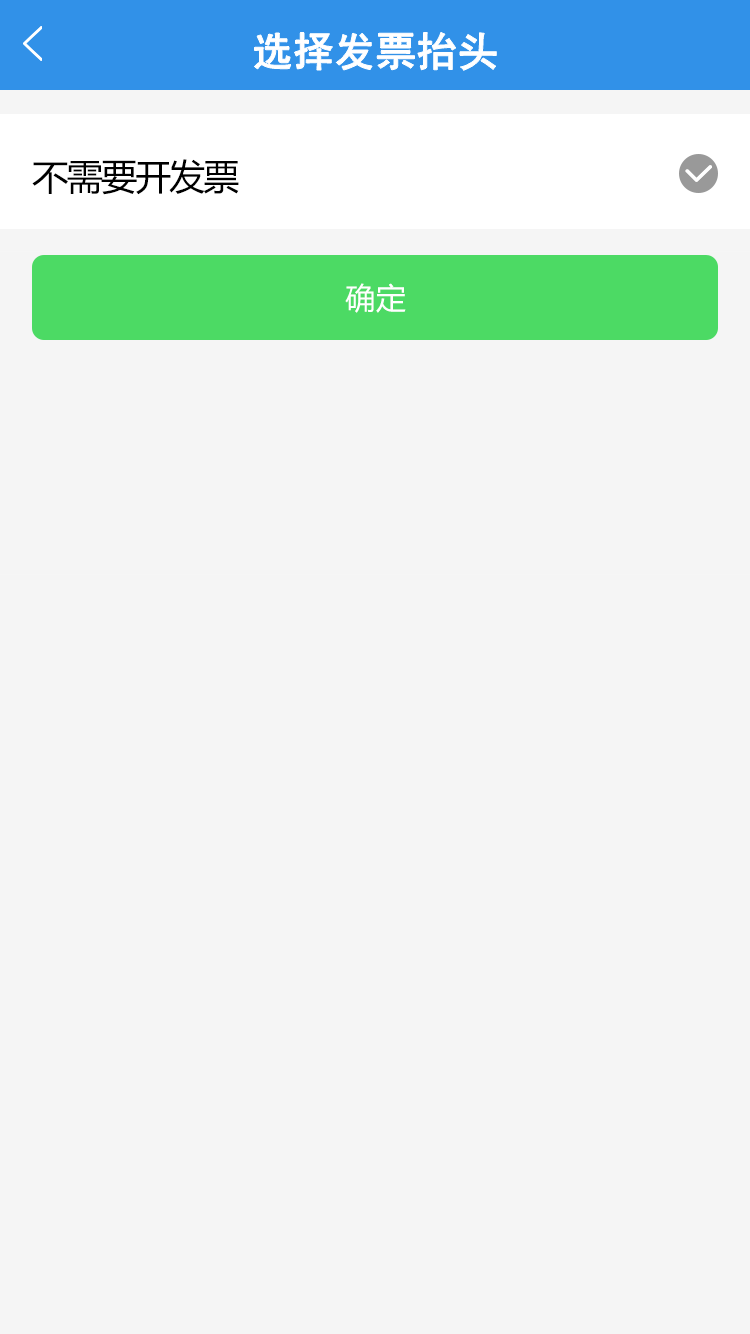
<style>
.page{position:relative;width:750px;height:1334px;background:#f5f5f5}
.page>*{position:absolute;margin:0}
.t1{font:40px "SimHei";color:#ffffff;font-weight:bold}
.t2{font:36px "MicrosoftYaHei";letter-spacing:-0.05em;color:#000000}
.t3{font:30px "MicrosoftYaHei";letter-spacing:0.025em;color:#ffffff}
</style>
<div class="page">
<p class="t1" style="left:254px;top:32px;width:243px;height:39px">选择发票抬头</p>
<p class="t2" style="left:32px;top:159px;width:207px;height:36px">不需要开发票</p>
<p class="t3" style="left:345px;top:283px;width:61px;height:30px">确定</p>
</div>
